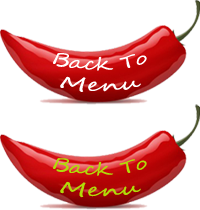
<style>
.page{position:relative;width:200px;height:210px;background:#ffffff}
.page>*{position:absolute;margin:0}
.t1{font:17.6px "SegoeScript";color:#ffffff;scale:1.17 1}
.t2{font:17.6px "SegoeScript";color:#b1db08;scale:1.17 1}
</style>
<div class="page">
<p class="t1" style="left:53px;top:53px;width:94px;height:39px;text-align:center">Back To<br>Menu</p>
<p class="t2" style="left:53px;top:158px;width:94px;height:40px;text-align:center">Back To<br>Menu</p>
</div>
